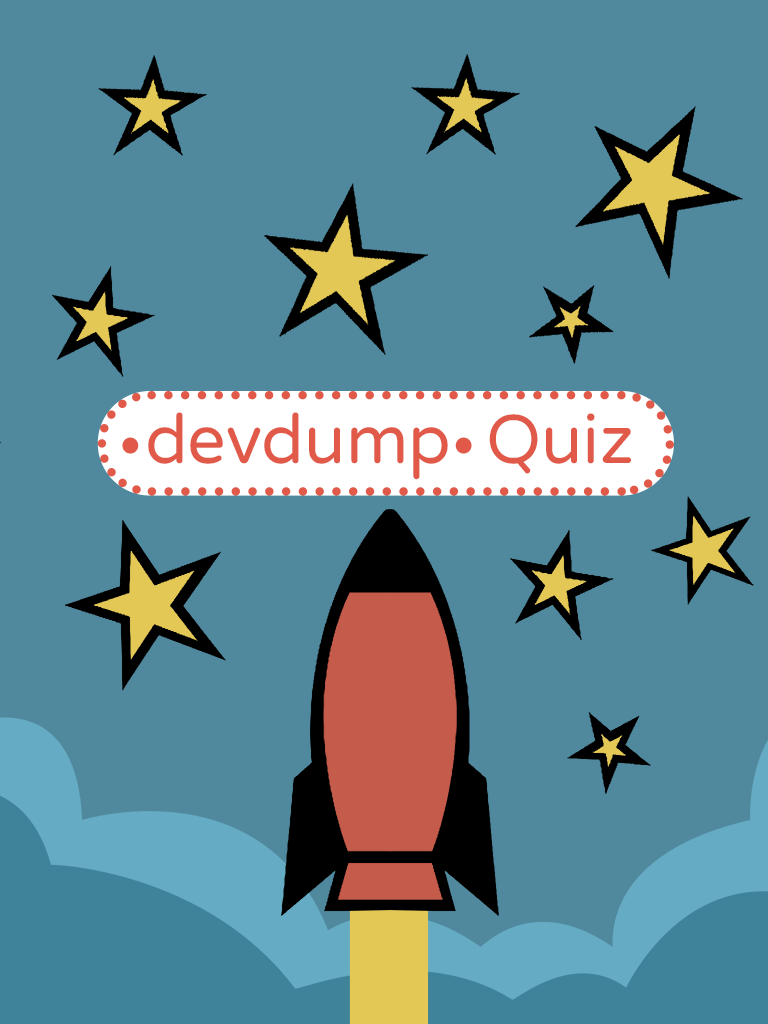
<style>
.page{position:relative;width:768px;height:1024px;background:#50899d}
.page>*{position:absolute;margin:0}
.t1{font:68.8px "VarelaRound-Regular";color:#e15a49}
</style>
<div class="page">
<p class="t1" style="left:148px;top:412px;width:483px;height:68px">devdump  Quiz</p>
</div>
